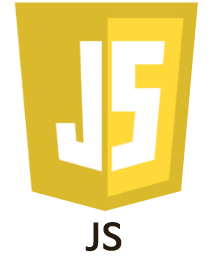
<style>
.page{position:relative;width:211px;height:260px;background:#ffffff}
.page>*{position:absolute;margin:0}
.t1{font:35.9px "NanumBarunGothicOTFBold";letter-spacing:0.035em;color:#271b0f;text-transform:uppercase}
</style>
<div class="page">
<p class="t1" style="left:85px;top:222px;width:37px;height:30px">js</p>
</div>
